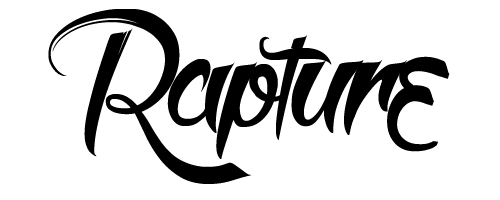
<style>
.page{position:relative;width:500px;height:200px;background:#ffffff}
.page>*{position:absolute;margin:0}
.t1{font:302px "DeathintheShadow";color:#000000}
.t2{font:302px "DeathintheShadow";letter-spacing:-0.001em;color:#000000}
.t3{font:286.9px "DeathintheShadow";letter-spacing:0.002em;color:#000000;scale:1.05 1}
.t4{font:271.8px "DeathintheShadow";letter-spacing:0.003em;color:#000000;scale:0.67 1}
.t5{font:332.2px "DeathintheShadow";letter-spacing:-0.019em;color:#000000;scale:0.91 1}
.t6{font:181.2px "DeathintheShadow";letter-spacing:-0.019em;color:#000000;font-weight:bold;scale:0.83 1}
</style>
<div class="page">
<p class="t1" style="left:48px;top:9px;width:402px;height:175px">R<span class="t2">a</span><span class="t3">p</span><span class="t4">t</span>u<span class="t5">r</span><span class="t6">E</span></p>
</div>
